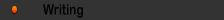
<style>
.page{position:relative;width:224px;height:20px;background:#333333}
.page>*{position:absolute;margin:0}
.t1{font:14.9px "ArialRoundedMTBold";color:#030303;scale:0.78 1}
</style>
<div class="page">
<p class="t1" style="left:43px;top:4px;width:40px;height:14px">Writing</p>
</div>
